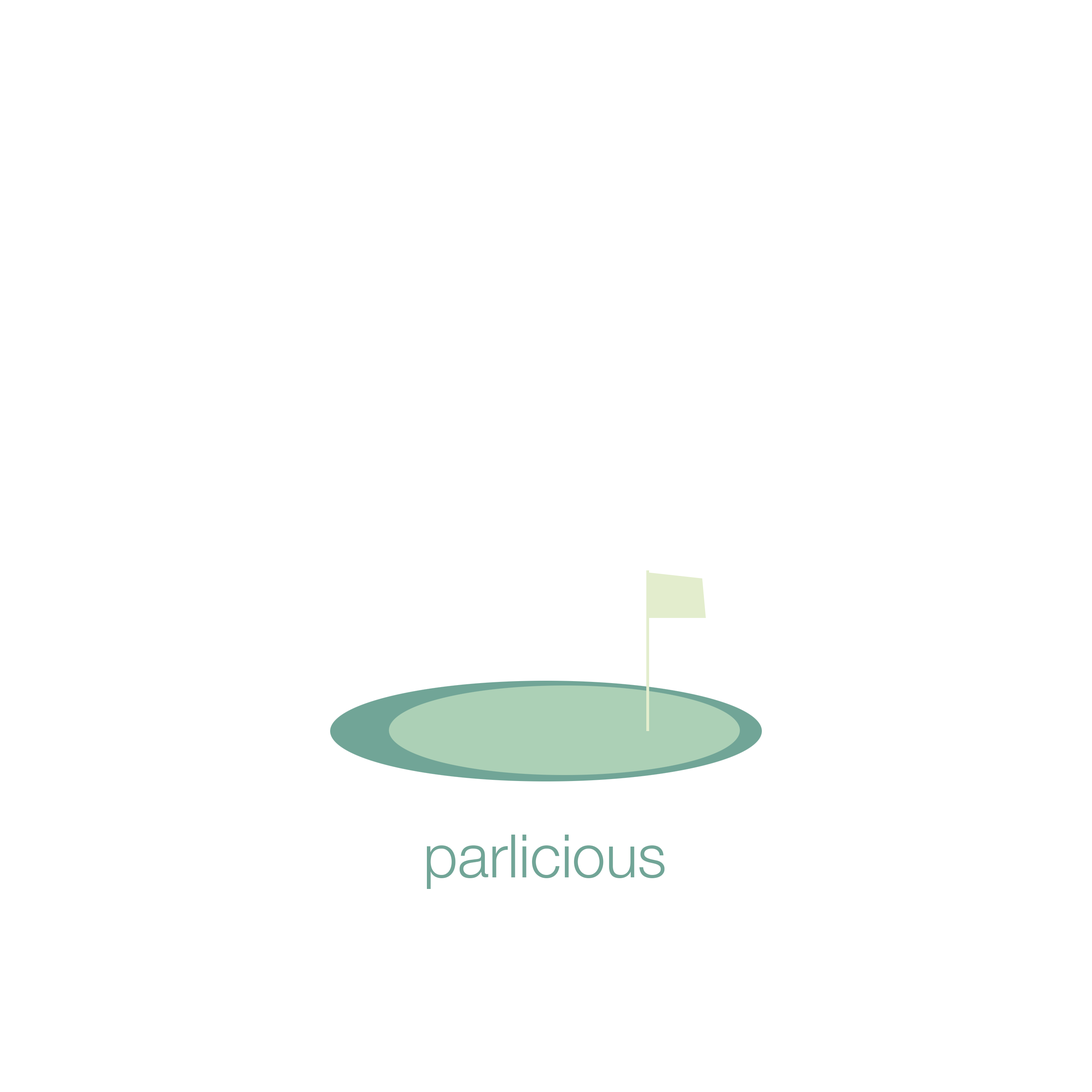
<style>
.page{position:relative;width:1092px;height:1092px;background:#ffffff}
.page>*{position:absolute;margin:0}
.t1{font:60px "HelveticaNeue-Light";color:#71a597}
</style>
<div class="page">
<p class="t1" style="left:427px;top:835px;width:238px;height:54px">parlicious</p>
</div>
